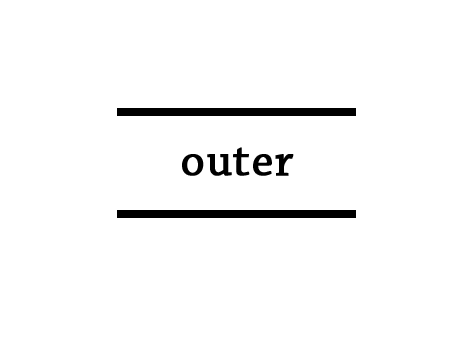
<style>
.page{position:relative;width:454px;height:340px;background:#ffffff}
.page>*{position:absolute;margin:0}
.t1{font:48px "ChaparralPro-Regular";color:#000000;font-weight:bold}
</style>
<div class="page">
<p class="t1" style="left:182px;top:147px;width:112px;height:29px">outer</p>
</div>
